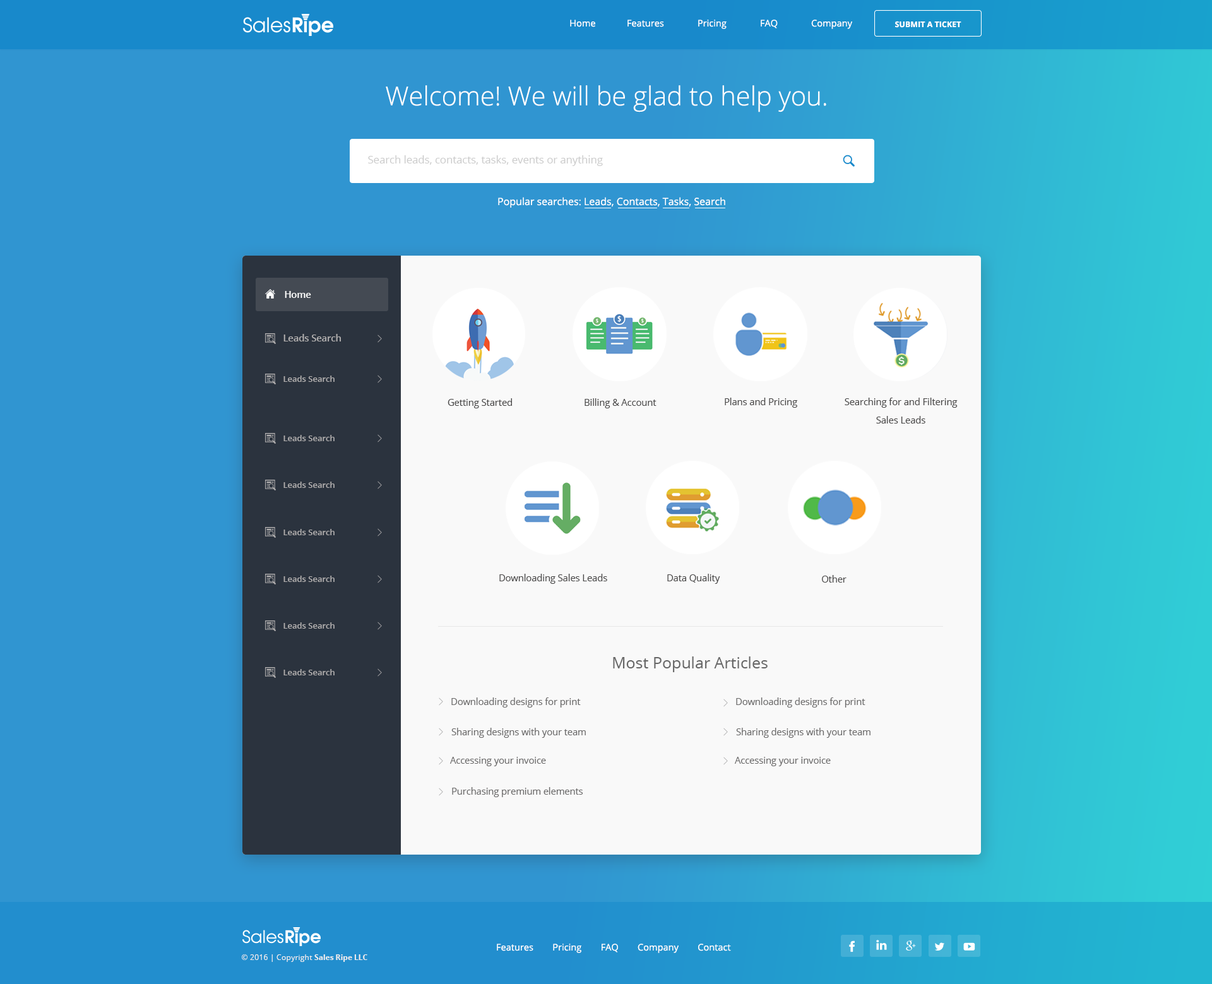
<style>
.page{position:relative;width:1212px;height:984px;background:#3095d1}
.page>*{position:absolute;margin:0}
.t1{font:9.2px "OpenSans";color:#ffffff}
.t2{font:7.9px "OpenSans-Bold";color:#ffffff;text-transform:uppercase}
.t3{font:26.3px "OpenSans-Light";color:#ffffff}
.t4{font:10.5px "OpenSans";color:#cbcbcb}
.t5{font:10.1px "OpenSans";color:#ffffff}
.t6{font:9.2px "OpenSans-Semibold";color:#ffffff}
.t7{font:9.2px "OpenSans-Semibold";color:#b1afaf}
.t8{font:8.2px "OpenSans-Semibold";color:#b1afaf}
.t9{font:9.2px "OpenSans";color:#494848}
.t10{font:9.2px/18.4px "OpenSans";color:#494848}
.t11{font:15.8px "OpenSans";color:#666666}
.t12{font:9.2px "OpenSans";color:#6b6a6a}
.t13{font:7.9px "OpenSans";color:#eeeeee}
.t14{font:7.9px "OpenSans-Bold";letter-spacing:-0.02em;color:#eeeeee}
</style>
<div class="page">
<p class="t1" style="left:570px;top:20px;width:282px;height:9px">Home             Features              Pricing              FAQ              Company</p>
<p class="t2" style="left:895px;top:21px;width:66px;height:7px">Submit a Ticket</p>
<p class="t3" style="left:386px;top:85px;width:440px;height:27px">Welcome! We will be glad to help you.</p>
<p class="t4" style="left:368px;top:155px;width:235px;height:11px">Search leads, contacts, tasks, events or anything</p>
<p class="t5" style="left:498px;top:197px;width:227px;height:11px">Popular searches: Leads, Contacts, Tasks, Search</p>
<p class="t6" style="left:285px;top:291px;width:26px;height:7px">Home</p>
<p class="t7" style="left:283px;top:334px;width:58px;height:7px">Leads Search</p>
<p class="t8" style="left:283px;top:376px;width:52px;height:6px">Leads Search</p>
<p class="t9" style="left:447px;top:398px;width:65px;height:10px">Getting Started</p>
<p class="t9" style="left:584px;top:398px;width:72px;height:10px">Billing &amp; Account</p>
<p class="t9" style="left:725px;top:398px;width:72px;height:10px">Plans and Pricing</p>
<p class="t10" style="left:844px;top:398px;width:113px;height:26px;text-align:center">Searching for and Filtering<br>Sales Leads</p>
<p class="t8" style="left:283px;top:435px;width:52px;height:6px">Leads Search</p>
<p class="t8" style="left:283px;top:482px;width:52px;height:6px">Leads Search</p>
<p class="t8" style="left:283px;top:529px;width:52px;height:6px">Leads Search</p>
<p class="t8" style="left:283px;top:576px;width:52px;height:6px">Leads Search</p>
<p class="t9" style="left:499px;top:574px;width:108px;height:10px">Downloading Sales Leads</p>
<p class="t9" style="left:667px;top:574px;width:53px;height:10px">Data Quality</p>
<p class="t9" style="left:822px;top:575px;width:24px;height:8px">Other</p>
<p class="t8" style="left:283px;top:622px;width:52px;height:7px">Leads Search</p>
<p class="t11" style="left:613px;top:656px;width:154px;height:16px">Most Popular Articles</p>
<p class="t8" style="left:283px;top:669px;width:52px;height:6px">Leads Search</p>
<p class="t12" style="left:451px;top:697px;width:130px;height:11px">Downloading designs for print</p>
<p class="t12" style="left:736px;top:697px;width:129px;height:11px">Downloading designs for print</p>
<p class="t12" style="left:451px;top:728px;width:135px;height:10px">Sharing designs with your team</p>
<p class="t12" style="left:736px;top:728px;width:134px;height:10px">Sharing designs with your team</p>
<p class="t12" style="left:450px;top:757px;width:96px;height:9px">Accessing your invoice</p>
<p class="t12" style="left:735px;top:757px;width:96px;height:9px">Accessing your invoice</p>
<p class="t12" style="left:452px;top:787px;width:131px;height:10px">Purchasing premium elements</p>
<p class="t1" style="left:497px;top:944px;width:234px;height:9px">Features        Pricing        FAQ        Company        Contact</p>
<p class="t13" style="left:242px;top:954px;width:125px;height:8px">© 2016 | Copyright <span class="t14">Sales Ripe LLC</span></p>
</div>
